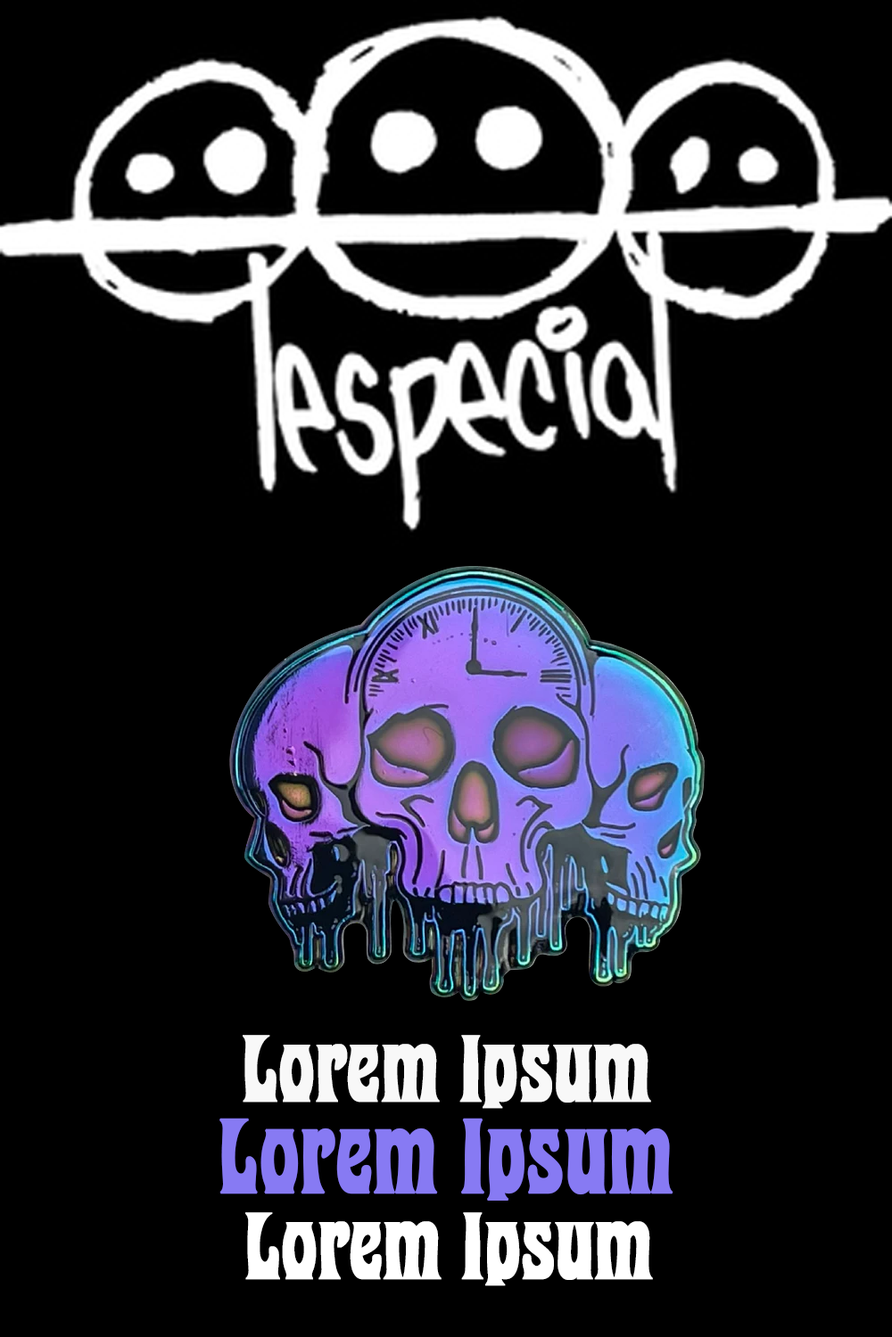
<style>
.page{position:relative;width:892px;height:1337px;background:#000000}
.page>*{position:absolute;margin:0}
.t1{font:80.2px "PurePsychedelia-Bold";color:#f8f8f8;font-weight:bold}
.t2{font:89.2px "PurePsychedelia-Bold";color:#877af3;font-weight:bold}
.t3{font:80.2px "PurePsychedelia-Bold";color:#ffffff;font-weight:bold}
</style>
<div class="page">
<p class="t1" style="left:243px;top:1035px;width:408px;height:74px">Lorem Ipsum</p>
<p class="t2" style="left:219px;top:1118px;width:454px;height:83px">Lorem Ipsum</p>
<p class="t3" style="left:245px;top:1213px;width:408px;height:74px">Lorem Ipsum</p>
</div>
